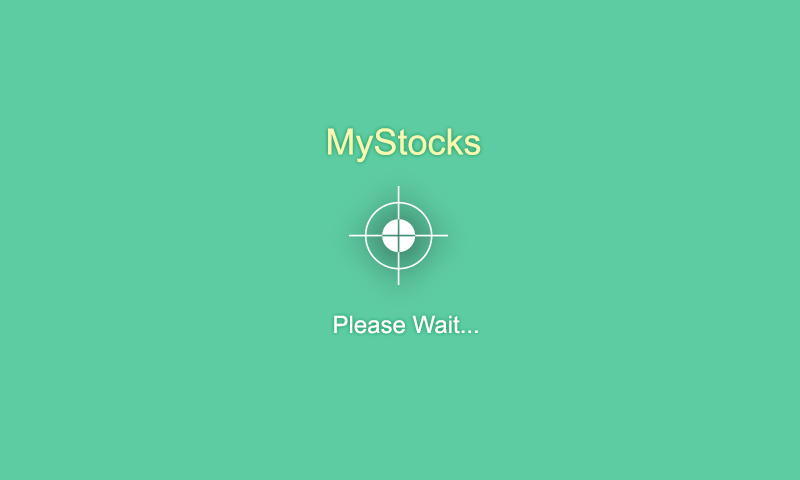
<style>
.page{position:relative;width:800px;height:480px;background:#5ecca3}
.page>*{position:absolute;margin:0}
.t1{font:36px "ArialMT";color:#f6f7b0}
.t2{font:24px "ArialMT";color:#fffffe}
</style>
<div class="page">
<p class="t1" style="left:328px;top:128px;width:153px;height:35px">MyStocks</p>
<p class="t2" style="left:334px;top:315px;width:144px;height:19px">Please Wait...</p>
</div>
